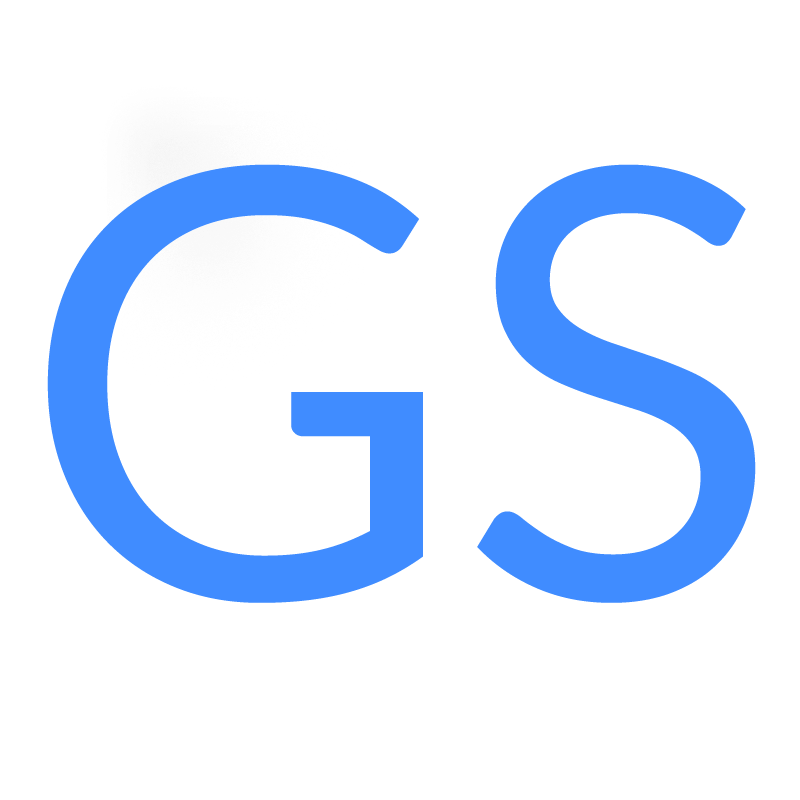
<style>
.page{position:relative;width:800px;height:800px;background:#ffffff}
.page>*{position:absolute;margin:0}
.t1{font:597.7px "Lato-Regular";color:#408cff}
</style>
<div class="page">
<p class="t1" style="left:47px;top:164px;width:709px;height:439px">GS</p>
</div>
